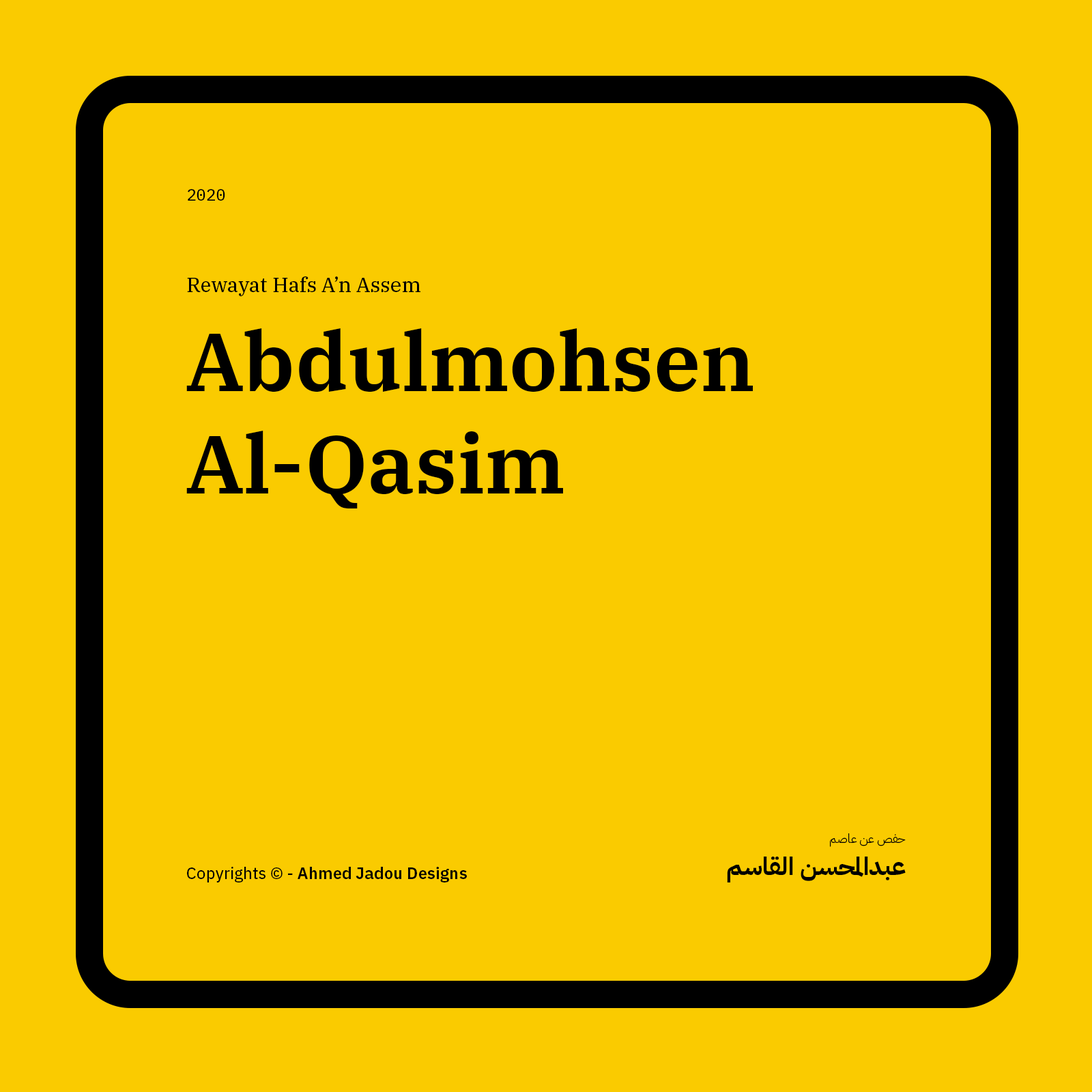
<style>
.page{position:relative;width:1092px;height:1092px;background:#facb00}
.page>*{position:absolute;margin:0}
.t1{font:16.4px "IBMPlexMono-Text";color:#000000}
.t2{font:20.5px "IBMPlexSerif-Text";color:#000000}
.t3{font:81.9px/102.7px "IBMPlexSerif-SemiBold";color:#000000}
.t4{font:12.3px "IBMPlexArabic-Light";color:#000000}
.t5{font:24.6px "IBMPlexArabic-Bold";color:#000000}
.t6{font:16.4px "IBMPlexSans-SemiBold";color:#000000}
.t7{font:16.4px "IBMPlexSans-Text";color:#000000}
</style>
<div class="page">
<p class="t1" style="left:188px;top:189px;width:37px;height:12px">2020</p>
<p class="t2" style="left:187px;top:276px;width:233px;height:20px">Rewayat Hafs A’n Assem</p>
<p class="t3" style="left:186px;top:328px;width:567px;height:180px">Abdulmohsen Al-Qasim</p>
<p class="t4" style="left:830px;top:833px;width:76px;height:14px">حفص عن عاصم</p>
<p class="t5" style="left:727px;top:857px;width:179px;height:25px">عبدالمحسن القاسم</p>
<p class="t6" style="left:187px;top:867px;width:280px;height:15px"><span class="t7">Copyrights © - </span>Ahmed Jadou Designs</p>
</div>
